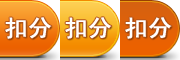
<style>
.page{position:relative;width:180px;height:60px}
.page>*{position:absolute;margin:0}
.t1{font:24px "SimHei";letter-spacing:-0.025em;color:#ffffff;font-weight:bold}
</style>
<div class="page">
<p class="t1" style="left:5px;top:17px;width:47px;height:22px">扣分</p>
<p class="t1" style="left:65px;top:17px;width:47px;height:22px">扣分</p>
<p class="t1" style="left:125px;top:17px;width:47px;height:22px">扣分</p>
</div>
